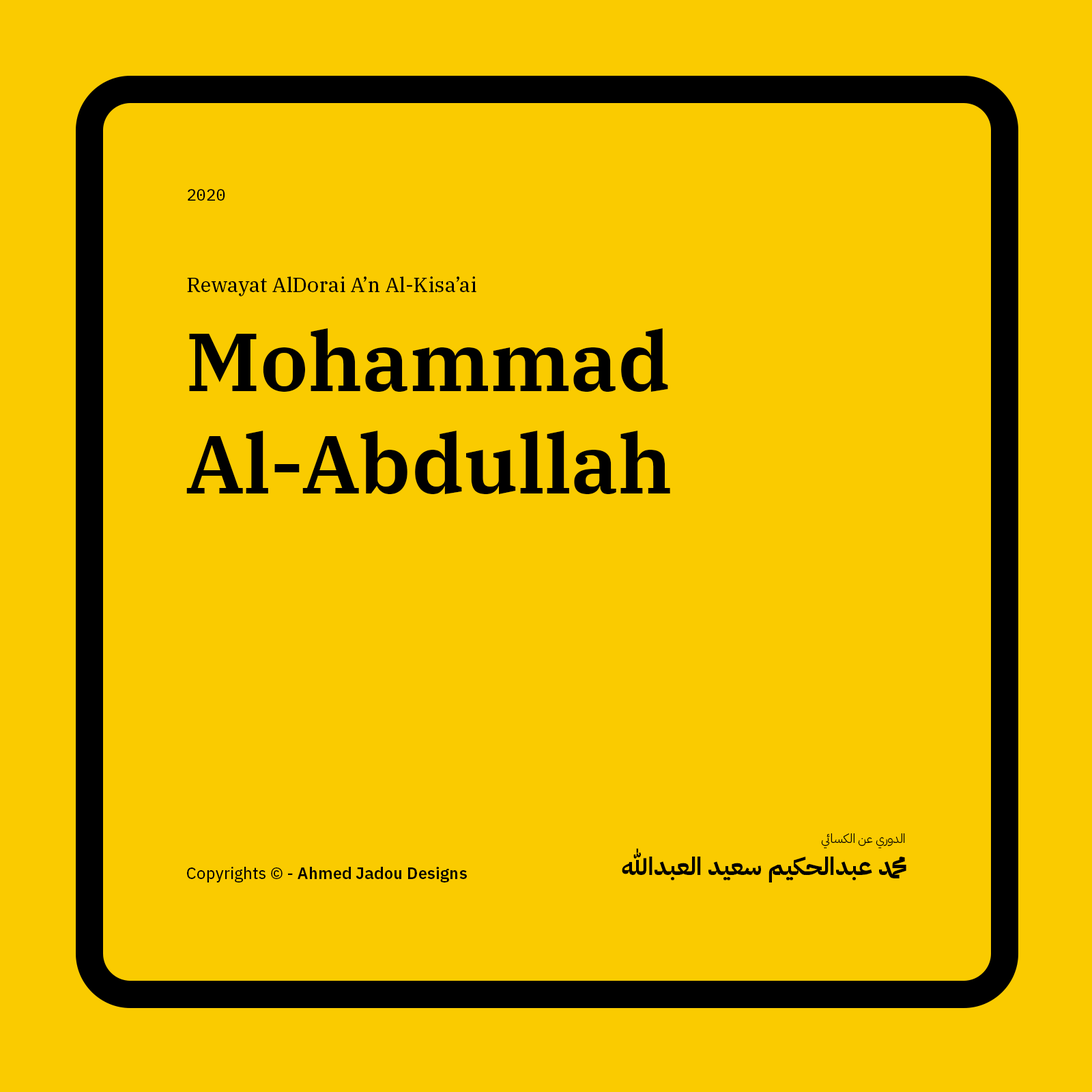
<style>
.page{position:relative;width:1092px;height:1092px;background:#facb00}
.page>*{position:absolute;margin:0}
.t1{font:16.4px "IBMPlexMono-Text";color:#000000}
.t2{font:20.5px "IBMPlexSerif-Text";color:#000000}
.t3{font:81.9px/102.7px "IBMPlexSerif-SemiBold";color:#000000}
.t4{font:12.3px "IBMPlexArabic-Light";color:#000000}
.t5{font:24.6px "IBMPlexArabic-Bold";color:#000000}
.t6{font:16.4px "IBMPlexSans-SemiBold";color:#000000}
.t7{font:16.4px "IBMPlexSans-Text";color:#000000}
</style>
<div class="page">
<p class="t1" style="left:188px;top:189px;width:37px;height:12px">2020</p>
<p class="t2" style="left:187px;top:276px;width:289px;height:20px">Rewayat AlDorai A’n Al-Kisa’ai</p>
<p class="t3" style="left:186px;top:328px;width:484px;height:166px">Mohammad Al-Abdullah</p>
<p class="t4" style="left:821px;top:833px;width:84px;height:15px">الدوري عن الكسائي</p>
<p class="t5" style="left:622px;top:848px;width:284px;height:34px">محمد عبدالحكيم سعيد العبدالله</p>
<p class="t6" style="left:187px;top:867px;width:280px;height:15px"><span class="t7">Copyrights © - </span>Ahmed Jadou Designs</p>
</div>
